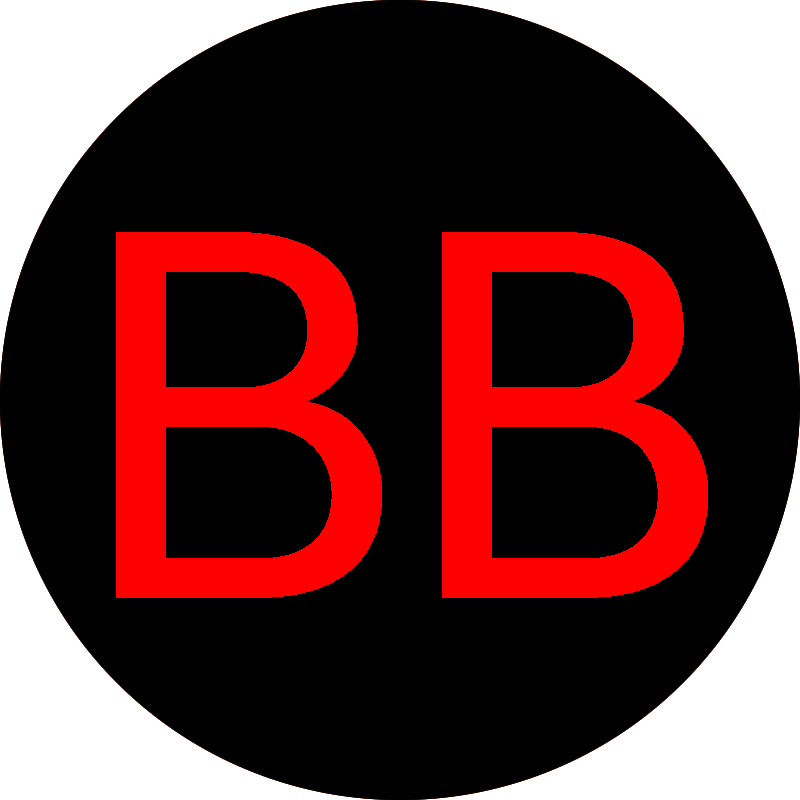
<style>
.page{position:relative;width:800px;height:800px;background:#000000}
.page>*{position:absolute;margin:0}
.t1{font:513px "Roboto-Regular";color:#ff0000}
</style>
<div class="page">
<p class="t1" style="left:116px;top:232px;width:592px;height:366px">BB</p>
</div>
